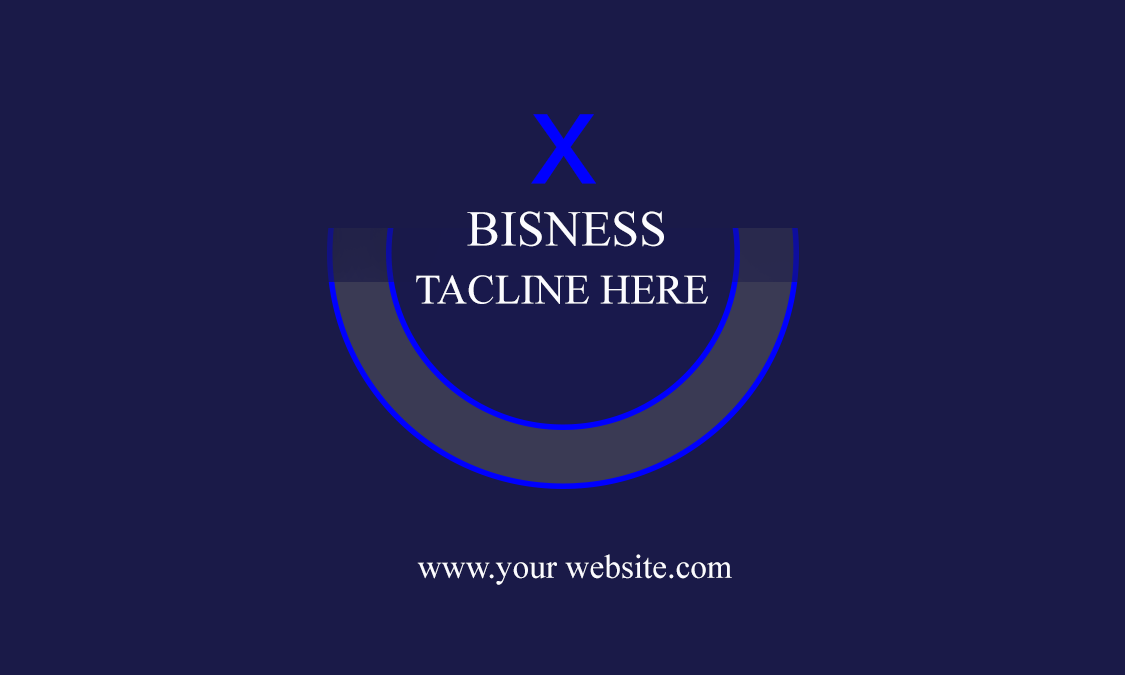
<style>
.page{position:relative;width:1125px;height:675px;background:#1a1a48}
.page>*{position:absolute;margin:0}
.t1{font:104.2px "Shruti-Bold";color:#0000ff}
.t2{font:50px "TimesNewRomanPSMT";color:#fbfbff}
.t3{font:41.7px "TimesNewRomanPSMT";color:#fbfbff}
.t4{font:33.3px "TimesNewRomanPSMT";color:#fbfbff}
</style>
<div class="page">
<p class="t1" style="left:531px;top:114px;width:65px;height:70px">X</p>
<p class="t2" style="left:467px;top:211px;width:197px;height:36px">BISNESS</p>
<p class="t3" style="left:416px;top:275px;width:292px;height:29px">TACLINE HERE</p>
<p class="t4" style="left:417px;top:554px;width:315px;height:31px">www.your website.com</p>
</div>
